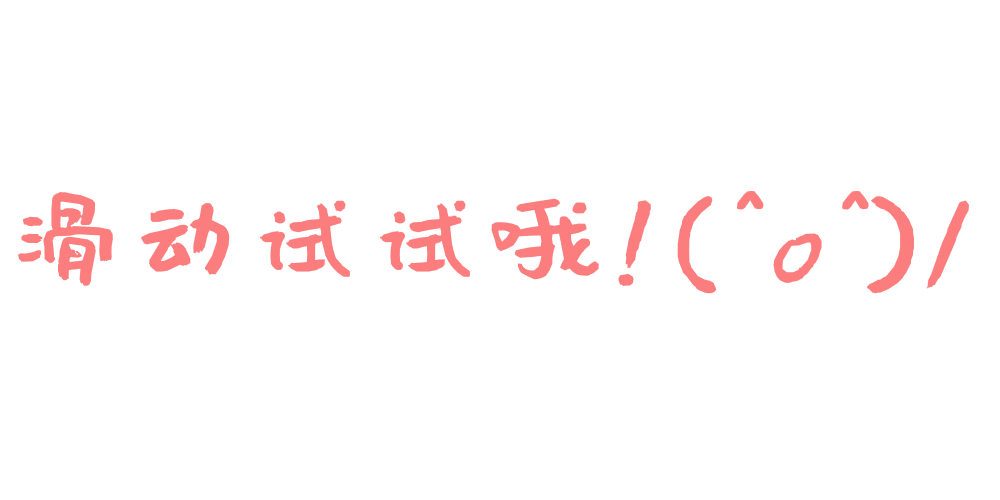
<style>
.page{position:relative;width:1000px;height:500px;background:#ffffff}
.page>*{position:absolute;margin:0}
.t1{font:120px "Muyao-Softbrush";color:#fc7d7d}
</style>
<div class="page">
<p class="t1" style="left:17px;top:190px;width:952px;height:104px">滑动试试哦!(^o^)/</p>
</div>
